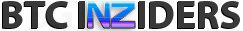
<style>
.page{position:relative;width:243px;height:31px;background:#ffffff}
.page>*{position:absolute;margin:0}
.t1{font:40px "MyriadPro-Bold";color:#393939}
</style>
<div class="page">
<p class="t1" style="left:3px;top:1px;width:237px;height:27px">BTC I      IDERS</p>
</div>
